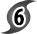
<style>
.page{position:relative;width:37px;height:34px;background:#ffffff}
.page>*{position:absolute;margin:0}
.t1{font:24.9px "MyriadPro-BoldCond";letter-spacing:0.115em;color:#000000}
</style>
<div class="page">
<p class="t1" style="left:14px;top:8px;width:10px;height:18px">6</p>
</div>
